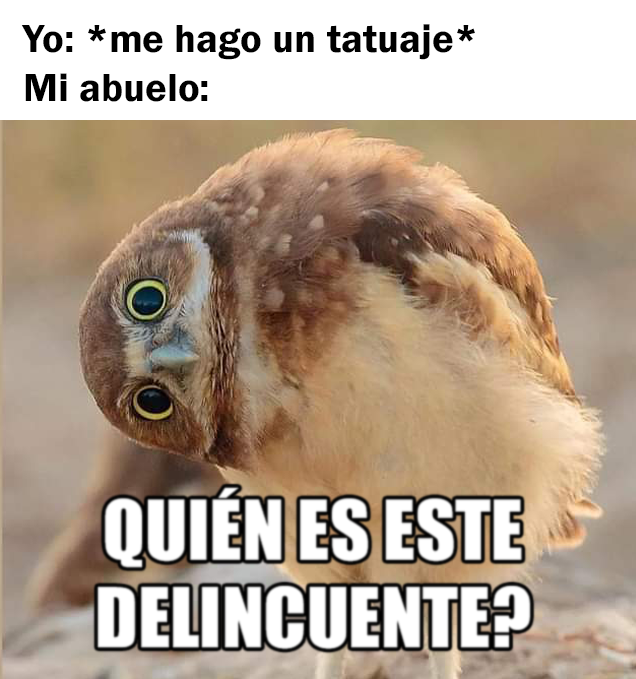
<style>
.page{position:relative;width:636px;height:679px;background:#ffffff}
.page>*{position:absolute;margin:0}
.t1{font:40.6px "FranklinGothic-Demi";color:#000000}
</style>
<div class="page">
<p class="t1" style="left:21px;top:24px;width:454px;height:78px">Yo: *me hago un tatuaje*<br>Mi abuelo:</p>
</div>
